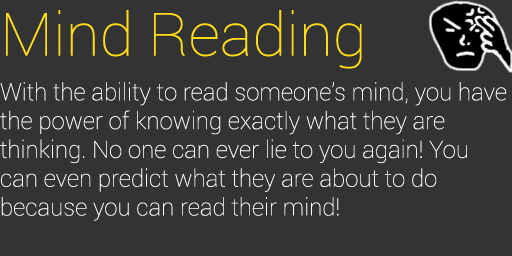
<style>
.page{position:relative;width:512px;height:256px;background:#333333}
.page>*{position:absolute;margin:0}
.t1{font:60px "Roboto-Thin";color:#ffdd17;scale:1.03 1}
.t2{font:24px "Roboto-Thin";color:#ffffff}
</style>
<div class="page">
<p class="t1" style="left:6px;top:10px;width:356px;height:59px">Mind Reading</p>
<p class="t2" style="left:0px;top:82px;width:507px;height:139px">With the ability to read someone’s mind, you have the power of knowing exactly what they are <br>thinking. No one can ever lie to you again! You can even predict what they are about to do <br>because you can read their mind!</p>
</div>
